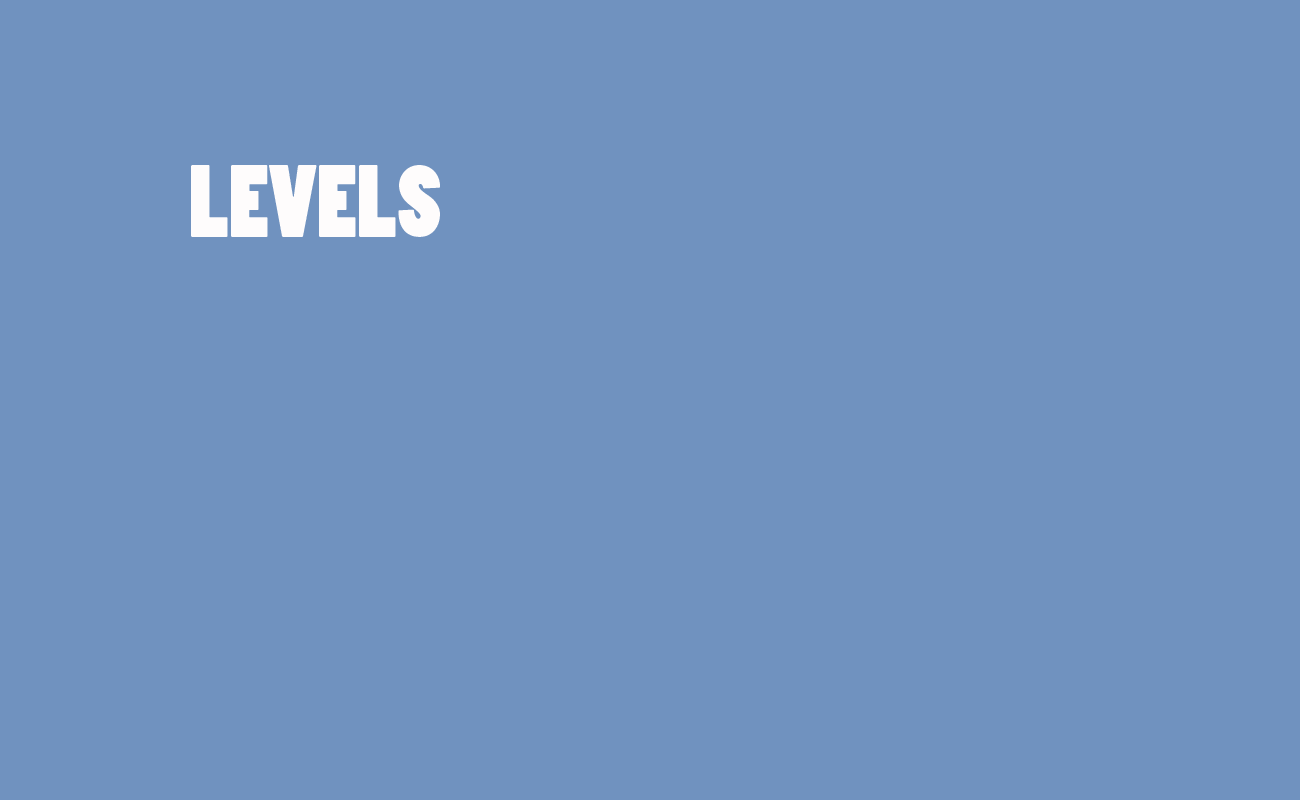
<style>
.page{position:relative;width:1300px;height:800px;background:#7092bf}
.page>*{position:absolute;margin:0}
.t1{font:96px "PoplarStd";color:#fefcfc}
</style>
<div class="page">
<p class="t1" style="left:191px;top:165px;width:249px;height:72px">LEVELS</p>
</div>
